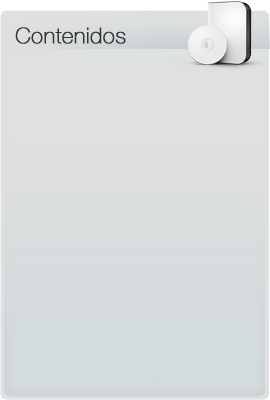
<style>
.page{position:relative;width:270px;height:400px;background:#dfe0e0}
.page>*{position:absolute;margin:0}
.t1{font:22px "HelveticaNeueCE-Thin";color:#333333;font-weight:bold}
</style>
<div class="page">
<p class="t1" style="left:15px;top:27px;width:111px;height:17px">Contenidos</p>
</div>
